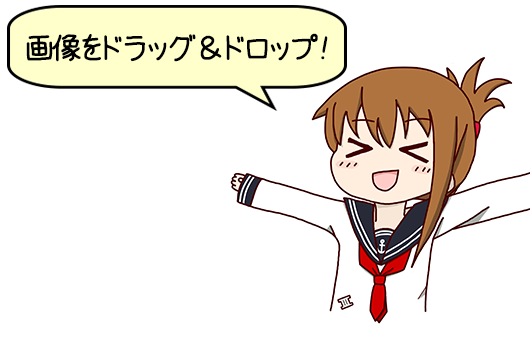
<style>
.page{position:relative;width:530px;height:350px;background:#ffffff}
.page>*{position:absolute;margin:0}
.t1{font:30px "HonyaJi-Re";letter-spacing:-0.1em;color:#000000;font-weight:bold}
.t2{font:30px "HonyaJi-Re";letter-spacing:-0.4em;color:#000000;font-weight:bold}
</style>
<div class="page">
<p class="t1" style="left:26px;top:33px;width:302px;height:29px">画像をドラッグ＆ドロッ<span class="t2">プ！</span></p>
</div>
